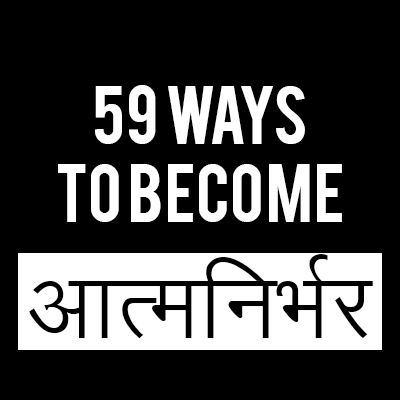
<style>
.page{position:relative;width:400px;height:400px;background:#000000}
.page>*{position:absolute;margin:0}
.t1{font:65px "Bebas";color:#ffffff}
.t2{font:110px "KrutiDev010";color:#000000}
</style>
<div class="page">
<p class="t1" style="left:58px;top:85px;width:284px;height:137px;text-align:center">59 WAYS<br>TO BECOME</p>
<p class="t2" style="left:29px;top:254px;width:344px;height:85px">vkRefuHkZj</p>
</div>
